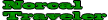
<style>
.page{position:relative;width:108px;height:20px;background:#ffffff}
.page>*{position:absolute;margin:0}
.t1{font:10px/11px "BlackoakStd";color:#068c00}
</style>
<div class="page">
<p class="t1" style="left:3px;top:1px;width:103px;height:19px">Norcal<br>Traveler</p>
</div>
